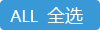
<style>
.page{position:relative;width:100px;height:30px;background:#3998d6}
.page>*{position:absolute;margin:0}
.t1{font:16px "MicrosoftYaHei";color:#ffffff}
.t2{font:18px "MicrosoftYaHei";color:#ffffff}
</style>
<div class="page">
<p class="t1" style="left:10px;top:10px;width:28px;height:12px">ALL</p>
<p class="t2" style="left:47px;top:7px;width:36px;height:17px">全选</p>
</div>
